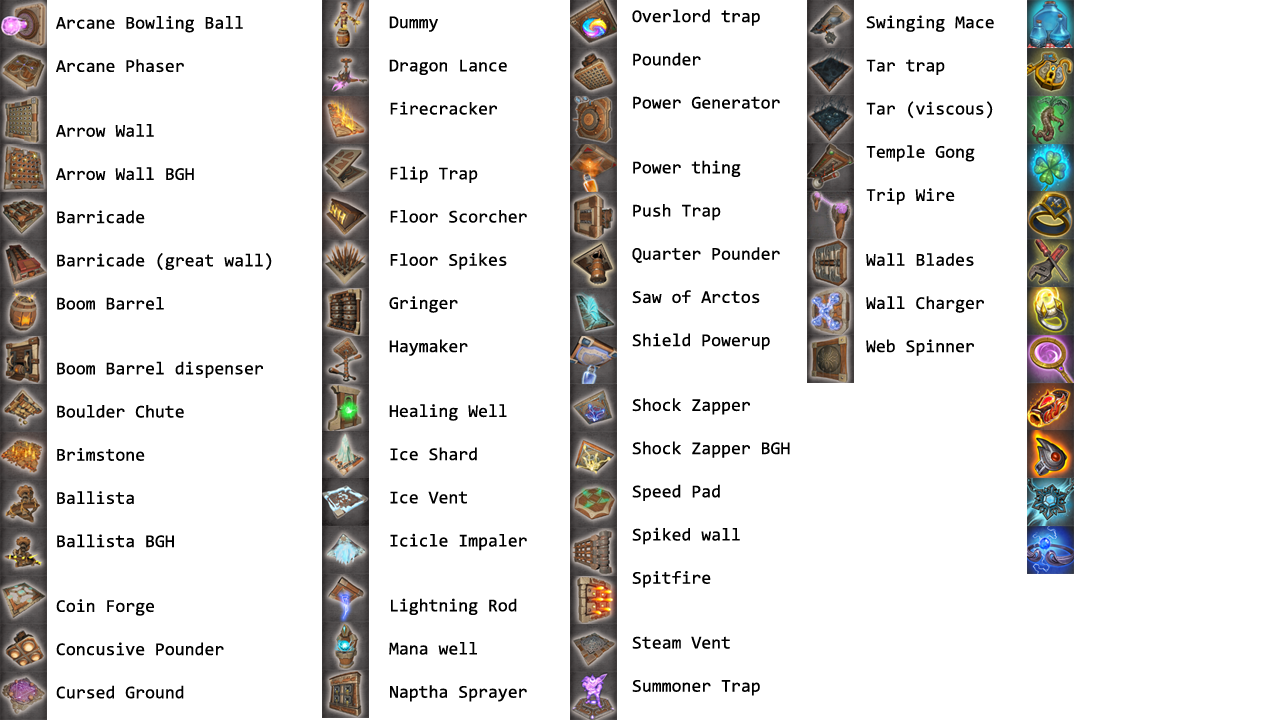
<style>
.page{position:relative;width:1280px;height:720px;background:#ffffff}
.page>*{position:absolute;margin:0}
.t1{font:18px "Consolas";color:#000000}
</style>
<div class="page">
<p class="t1" style="left:56px;top:16px;width:216px;height:683px">Arcane Bowling Ball<br><br>Arcane Phaser<br><br><br>Arrow Wall<br><br>Arrow Wall BGH<br><br>Barricade<br><br>Barricade (great wall)<br><br>Boom Barrel<br><br><br>Boom Barrel dispenser<br><br>Boulder Chute<br><br>Brimstone<br><br>Ballista<br><br>Ballista BGH<br><br><br>Coin Forge<br><br>Concusive Pounder<br><br>Cursed Ground</p>
<p class="t1" style="left:389px;top:16px;width:138px;height:686px">Dummy<br><br>Dragon Lance<br><br>Firecracker<br><br><br>Flip Trap<br><br>Floor Scorcher<br><br>Floor Spikes<br><br>Gringer<br><br>Haymaker<br><br><br>Healing Well<br><br>Ice Shard<br><br>Ice Vent<br><br>Icicle Impaler<br><br><br>Lightning Rod<br><br>Mana well<br><br>Naptha Sprayer</p>
<p class="t1" style="left:632px;top:9px;width:158px;height:687px">Overlord trap<br><br>Pounder<br><br>Power Generator<br><br><br>Power thing<br><br>Push Trap<br><br>Quarter Pounder<br><br>Saw of Arctos<br><br>Shield Powerup<br><br><br>Shock Zapper<br><br>Shock Zapper BGH<br><br>Speed Pad<br><br>Spiked wall<br><br>Spitfire<br><br><br>Steam Vent<br><br>Summoner Trap</p>
<p class="t1" style="left:866px;top:15px;width:128px;height:341px">Swinging Mace<br><br>Tar trap<br><br>Tar (viscous)<br><br>Temple Gong<br><br>Trip Wire<br><br><br>Wall Blades<br><br>Wall Charger<br><br>Web Spinner</p>
</div>
